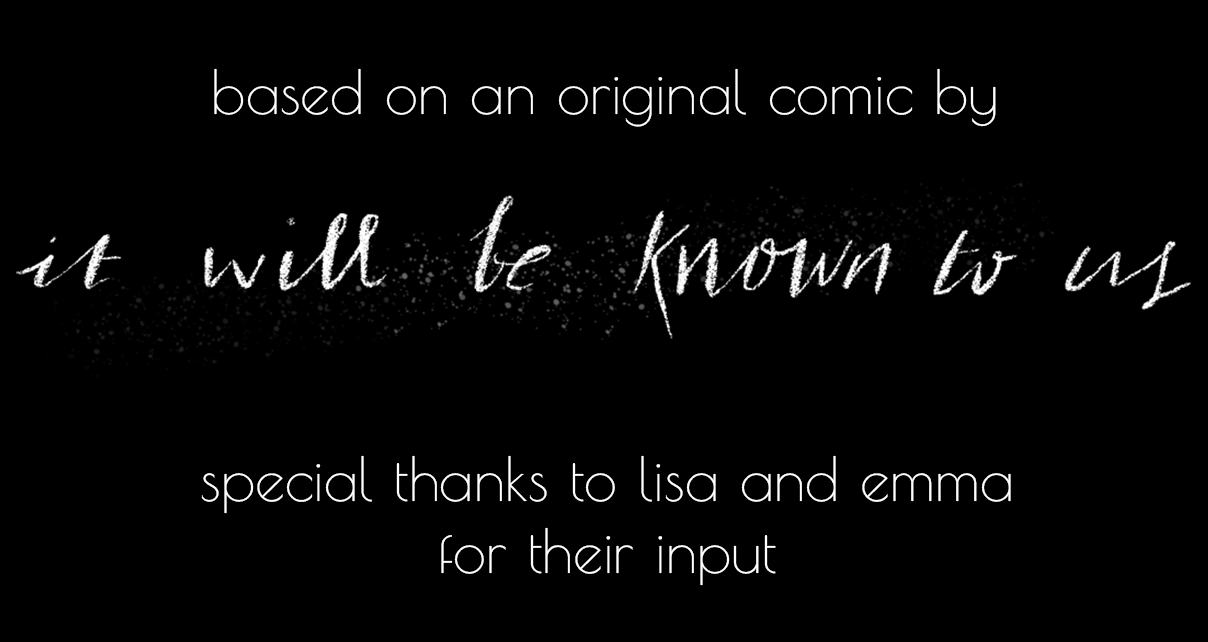
<style>
.page{position:relative;width:1208px;height:642px;background:#000000}
.page>*{position:absolute;margin:0}
.t1{font:60px "PoiretOne-Regular";color:#ffffff}
</style>
<div class="page">
<p class="t1" style="left:214px;top:68px;width:782px;height:59px">based on an original comic by</p>
<p class="t1" style="left:201px;top:455px;width:810px;height:131px;text-align:center">special thanks to lisa and emma<br>for their input</p>
</div>
